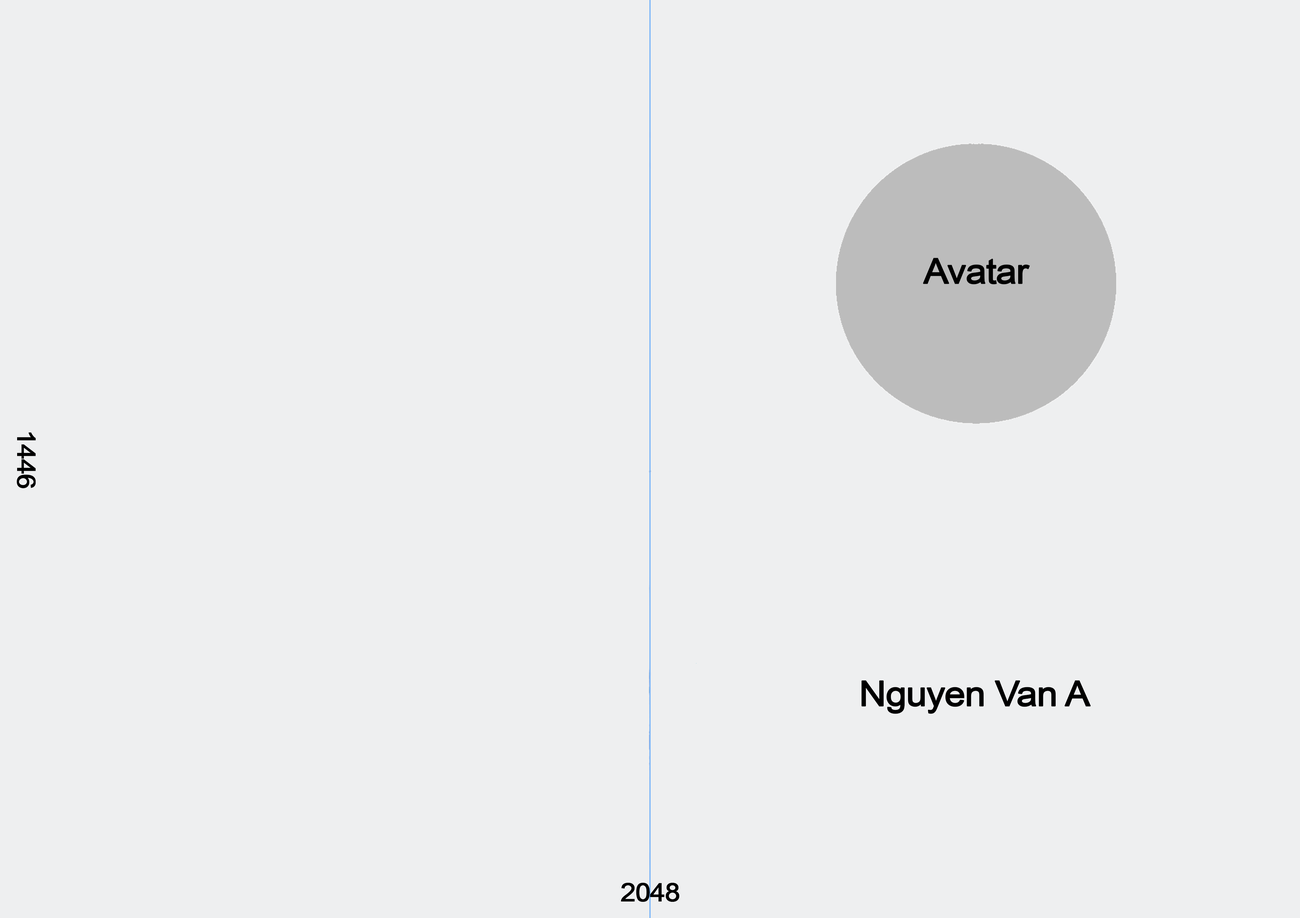
<style>
.page{position:relative;width:1300px;height:918px;background:#eeeff0}
.page>*{position:absolute;margin:0}
.t1{font:34.9px "ArialMT";letter-spacing:-0.04em;color:#000000;font-weight:bold;scale:1.07 1}
.t2{font:25.4px "ArialMT";letter-spacing:-0.04em;color:#000000;font-weight:bold;scale:1.07 1}
</style>
<div class="page">
<p class="t1" style="left:923px;top:258px;width:107px;height:26px">Avatar</p>
<p class="t2" style="left:17px;top:432px;width:19px;height:56px;rotate:90deg">1446</p>
<p class="t1" style="left:861px;top:680px;width:229px;height:34px">Nguyen Van A</p>
<p class="t2" style="left:621px;top:882px;width:58px;height:19px">2048</p>
</div>
